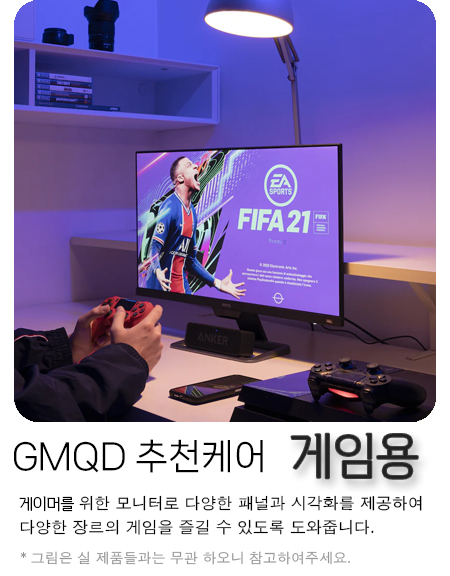
<style>
.page{position:relative;width:450px;height:576px;background:#ffffff}
.page>*{position:absolute;margin:0}
.t1{font:50px "VITRO-PRIDE-OTF";color:#222222}
.t2{font:34.9px "NanumSquareNeo-bRg";color:#000000}
.t3{font:16px/24px "AppleGothic";color:#000000}
.t4{font:16px/24px "VITRO-PRIDE-OTF";color:#000000}
.t5{font:14px "AppleGothic";color:#969696}
.t6{font:14px "VITRO-PRIDE-OTF";color:#969696}
</style>
<div class="page">
<p class="t1" style="left:291px;top:433px;width:127px;height:46px">게임용</p>
<p class="t2" style="left:14px;top:439px;width:249px;height:34px">GMQD 추천케어</p>
<p class="t3" style="left:19px;top:495px;width:403px;height:40px"><span class="t4">게이머를 </span>위한 모니터로 다양한 패널과 시각화를 제공하여<br>다양한 장르의 게임을 즐길 수 있도록 도와줍니다.</p>
<p class="t5" style="left:20px;top:551px;width:330px;height:14px"><span class="t6">* </span>그림은 실 제품들과는 무관 하오니 참고하여주세요.</p>
</div>
